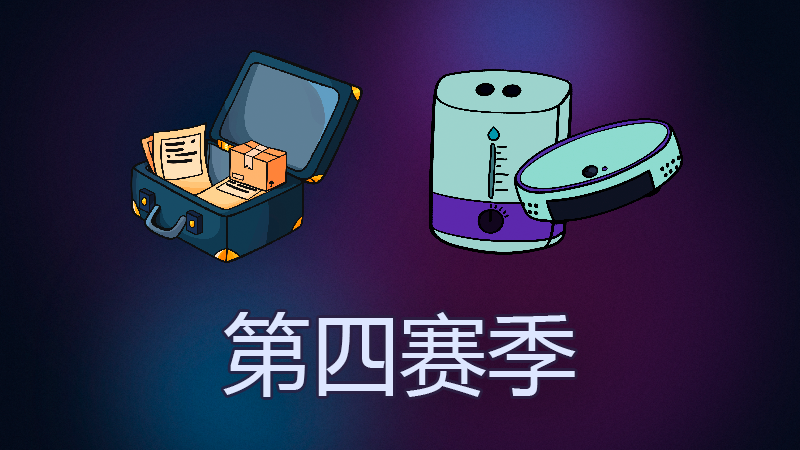
<style>
.page{position:relative;width:800px;height:450px}
.page>*{position:absolute;margin:0}
.t1{font:88.3px "MicrosoftYaHei";color:#dde6ff}
</style>
<div class="page">
<p class="t1" style="left:223px;top:312px;width:353px;height:85px">第四赛季</p>
</div>
